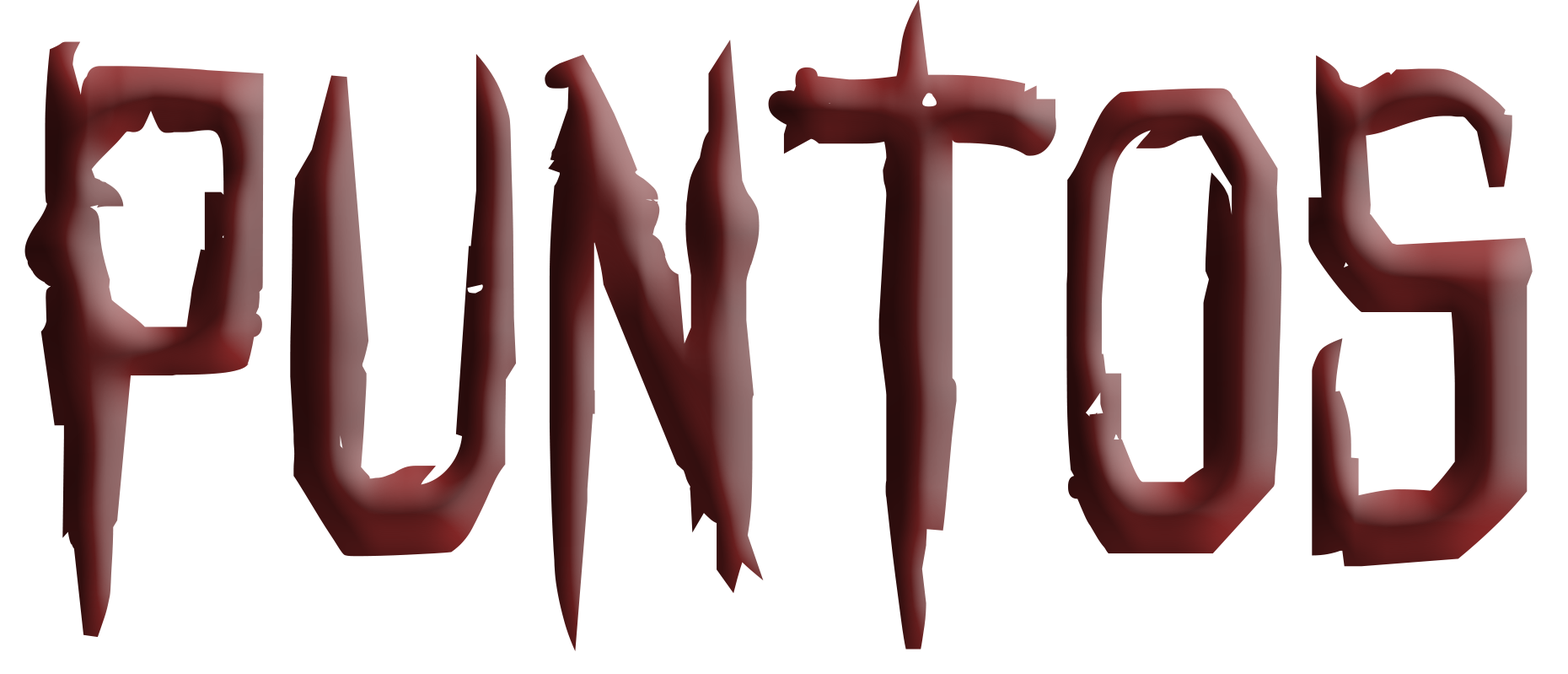
<style>
.page{position:relative;width:1568px;height:674px;background:#ffffff}
.page>*{position:absolute;margin:0}
.t1{font:673.5px "HorroroidBold"}
</style>
<div class="page">
<p class="t1" style="left:24px;top:0px;width:1509px;height:651px">PUNTOS</p>
</div>
